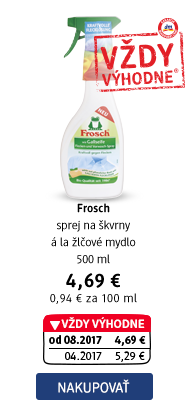
<style>
.page{position:relative;width:188px;height:409px;background:#ffffff}
.page>*{position:absolute;margin:0}
.t1{font:12px/17px "DMBrand-Regular";color:#000000}
.t2{font:12px "DMBrand-Bold";color:#000000}
.t3{font:20px "DMBrand-Bold";letter-spacing:0.04em;color:#000000}
.t4{font:12px/15px "DMBrand-Regular";letter-spacing:0.04em;color:#000000}
.t5{font:12px/17px "DMBrand-Bold";color:#000000}
.t6{font:12px/16px "DMBrand-Regular";color:#000000}
.t7{font:14px "DMBrand-Regular";letter-spacing:0.025em;color:#ffffff;text-transform:uppercase}
</style>
<div class="page">
<p class="t1" style="left:50px;top:203px;width:87px;height:101px;text-align:center"><span class="t2">Frosch<br></span>sprej na škvrny<br>á la žlčové mydlo<br>500 ml<br><span class="t3">4,69 €<br></span><span class="t4">0,94 € za 100 ml</span></p>
<p class="t5" style="left:49px;top:335px;width:97px;height:27px;text-align:center">od 08.2017     4,69 €<br><span class="t6">     04.2017    5,29 €</span></p>
<p class="t7" style="left:58px;top:379px;width:72px;height:14px">Nakupovať</p>
</div>
